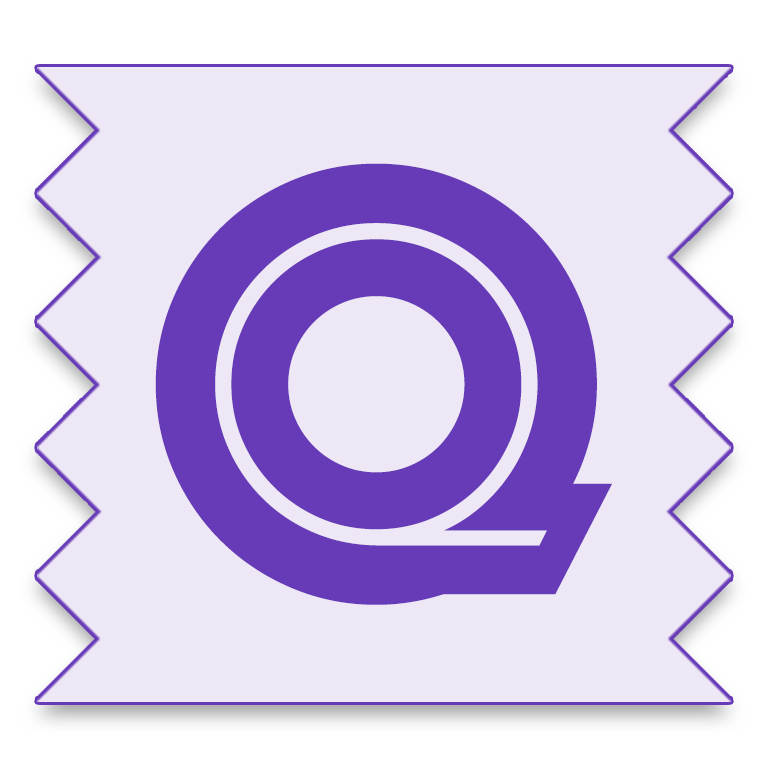
<style>
.page{position:relative;width:768px;height:768px;background:#ede7f6}
.page>*{position:absolute;margin:0}
.t1{font:630px "Phosphate-Inline";color:#673ab7;text-transform:uppercase}
</style>
<div class="page">
<p class="t1" style="left:155px;top:163px;width:457px;height:442px">Q</p>
</div>
